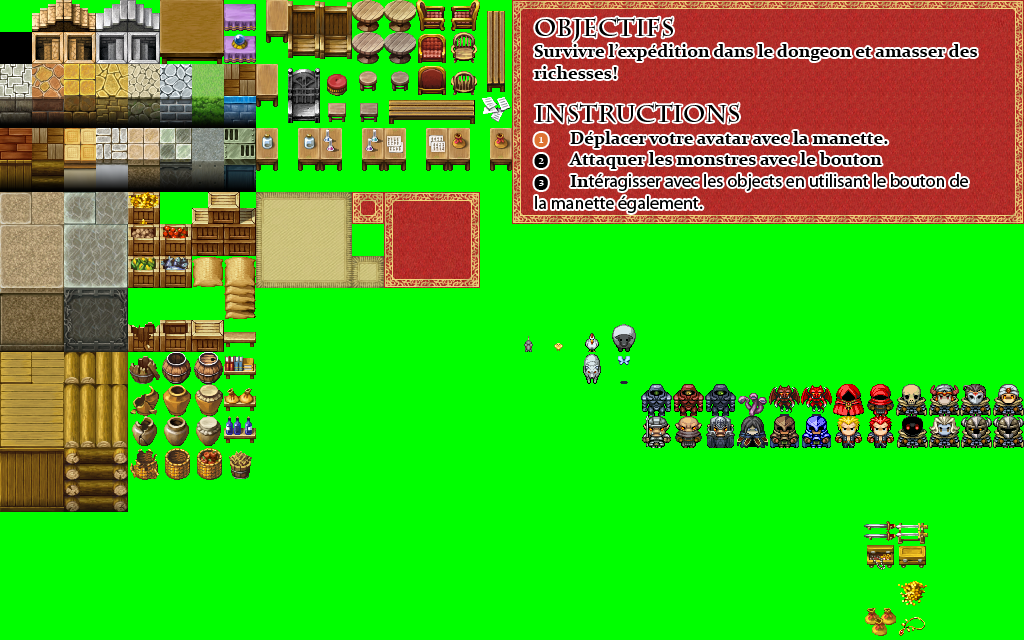
<style>
.page{position:relative;width:1024px;height:640px;background:#00ff00}
.page>*{position:absolute;margin:0}
.t1{font:18px "MyriadPro-Regular";color:#000000}
.t2{font:24px "CharlemagneStd-Bold";color:#000000}
.t3{font:18px "Constantia-Bold";color:#000000}
.t4{font:12px "Constantia-Bold";color:#de7332}
.t5{font:12px "Constantia-Bold";color:#000000}
</style>
<div class="page">
<p class="t1" style="left:534px;top:17px;width:443px;height:196px"><span class="t2">Objectifs<br></span><span class="t3">Survivre l’expédition dans le dongeon et amasser des richesses!<br><br></span><span class="t2">Instructions<br></span><span class="t4">❶</span><span class="t3"> Déplacer votre avatar avec la manette.<br></span><span class="t5">❷ </span><span class="t3">Attaquer les monstres avec le bouton<br></span><span class="t5">❸ </span><span class="t3">In</span>téragisser avec les objects en utilisant le bouton de la manette également.</p>
</div>
